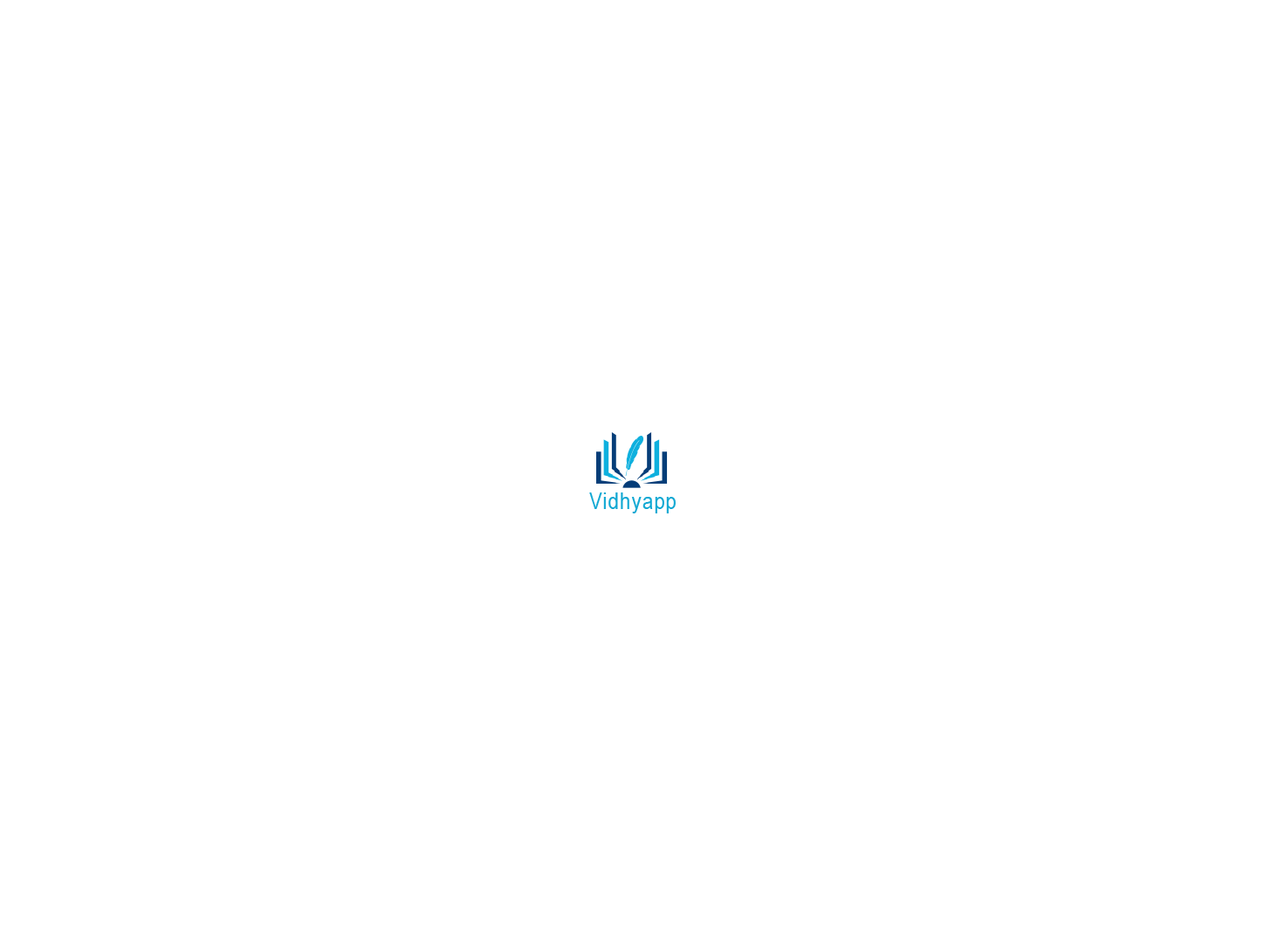
<style>
.page{position:relative;width:1264px;height:943px;background:#ffffff}
.page>*{position:absolute;margin:0}
.t1{font:23.7px "ArialNarrow";letter-spacing:0.04em;color:#11a8d3}
</style>
<div class="page">
<p class="t1" style="left:589px;top:492px;width:87px;height:21px">Vidhyapp</p>
</div>
